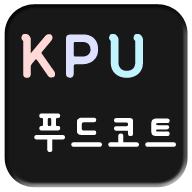
<style>
.page{position:relative;width:192px;height:192px;background:#181818}
.page>*{position:absolute;margin:0}
.t1{font:75px "YanoljaYacheB";letter-spacing:0.12em;color:#ffd8d8}
.t2{font:75px "YanoljaYacheB";letter-spacing:0.12em;color:#dee0ff}
.t3{font:75px "YanoljaYacheB";letter-spacing:0.12em;color:#c2f4ff}
.t4{font:56.2px "YanoljaYacheR";letter-spacing:0.07em;color:#ffffff}
</style>
<div class="page">
<p class="t1" style="left:21px;top:34px;width:122px;height:44px">K<span class="t2">P</span><span class="t3">U</span></p>
<p class="t4" style="left:34px;top:113px;width:142px;height:39px">푸드코트</p>
</div>
